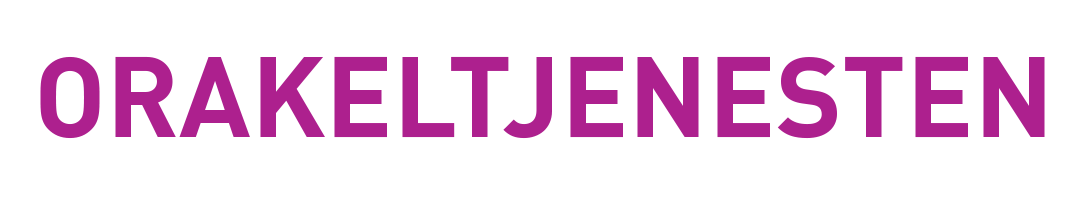
<style>
.page{position:relative;width:1080px;height:200px;background:#ffffff}
.page>*{position:absolute;margin:0}
.t1{font:112px "DIN-Bold";color:#ad208e}
</style>
<div class="page">
<p class="t1" style="left:40px;top:56px;width:1005px;height:83px">ORAKELTJENESTEN</p>
</div>
